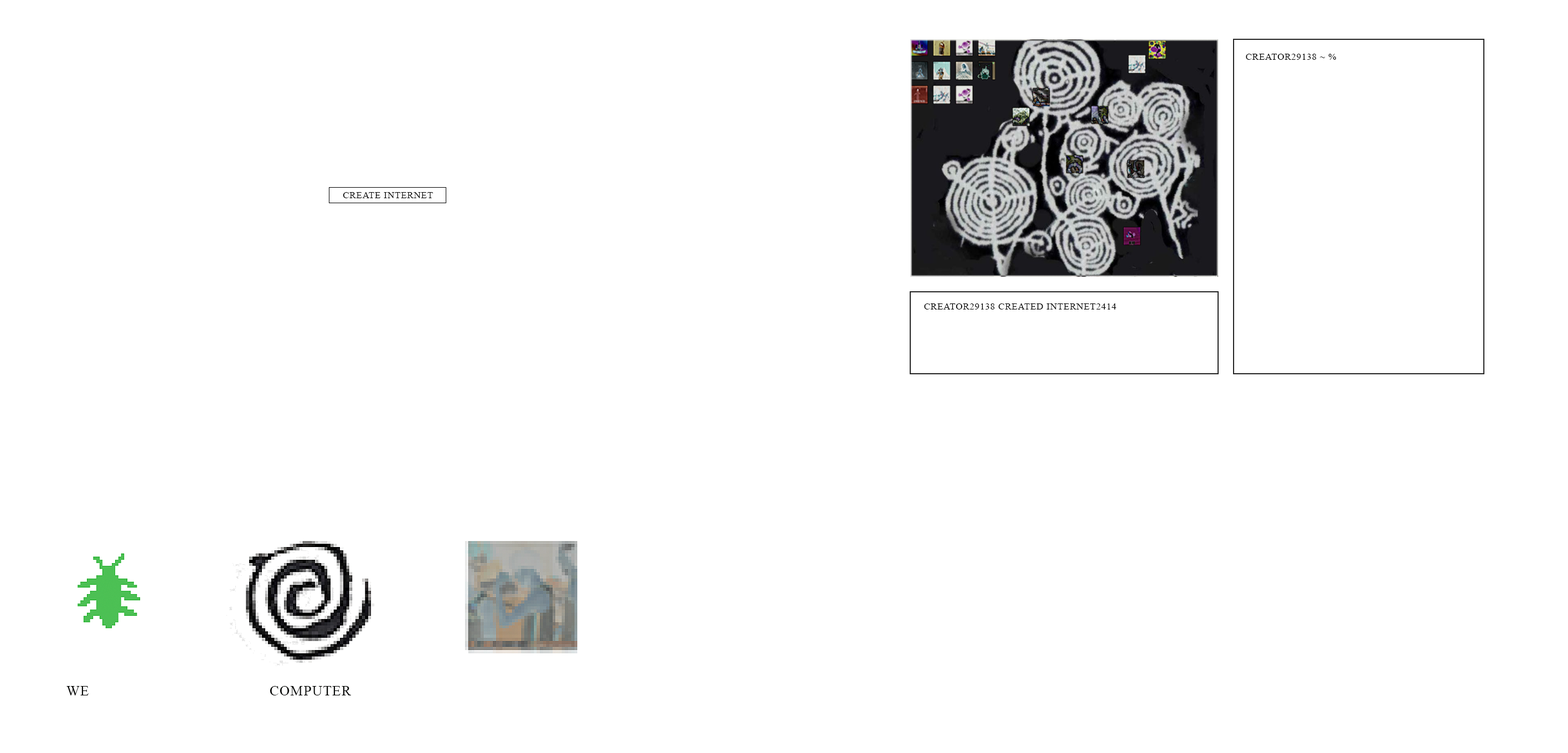
<style>
.page{position:relative;width:1568px;height:753px;background:#ffffff}
.page>*{position:absolute;margin:0}
.t1{font:9.2px "TimesNewRomanPSMT";letter-spacing:0.06em;color:#000000;text-transform:uppercase}
.t2{font:13.8px "TimesNewRomanPSMT";letter-spacing:0.06em;color:#070807;text-transform:uppercase}
</style>
<div class="page">
<p class="t1" style="left:1246px;top:54px;width:90px;height:6px">creator29138 ~ %</p>
<p class="t1" style="left:343px;top:192px;width:90px;height:6px">Create INTERNET</p>
<p class="t1" style="left:924px;top:303px;width:192px;height:7px">creator29138 Created Internet2414</p>
<p class="t2" style="left:66px;top:686px;width:23px;height:9px">WE</p>
<p class="t2" style="left:270px;top:686px;width:81px;height:9px">COMPUTER</p>
</div>
